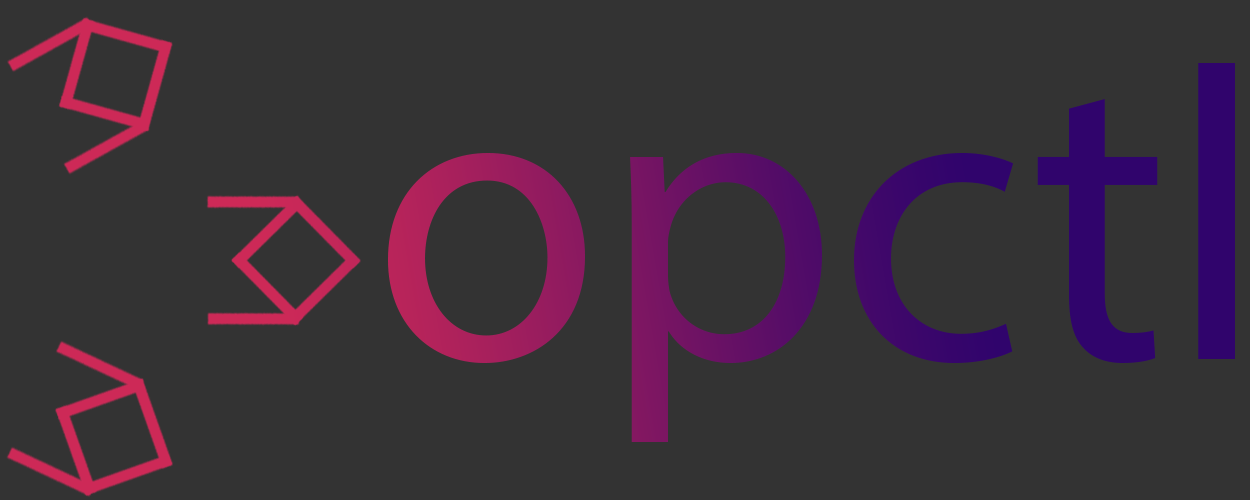
<style>
.page{position:relative;width:1250px;height:500px;background:#333333}
.page>*{position:absolute;margin:0}
.t1{font:416.7px "MyriadPro-Regular"}
</style>
<div class="page">
<p class="t1" style="left:388px;top:63px;width:847px;height:379px">opctl</p>
</div>
